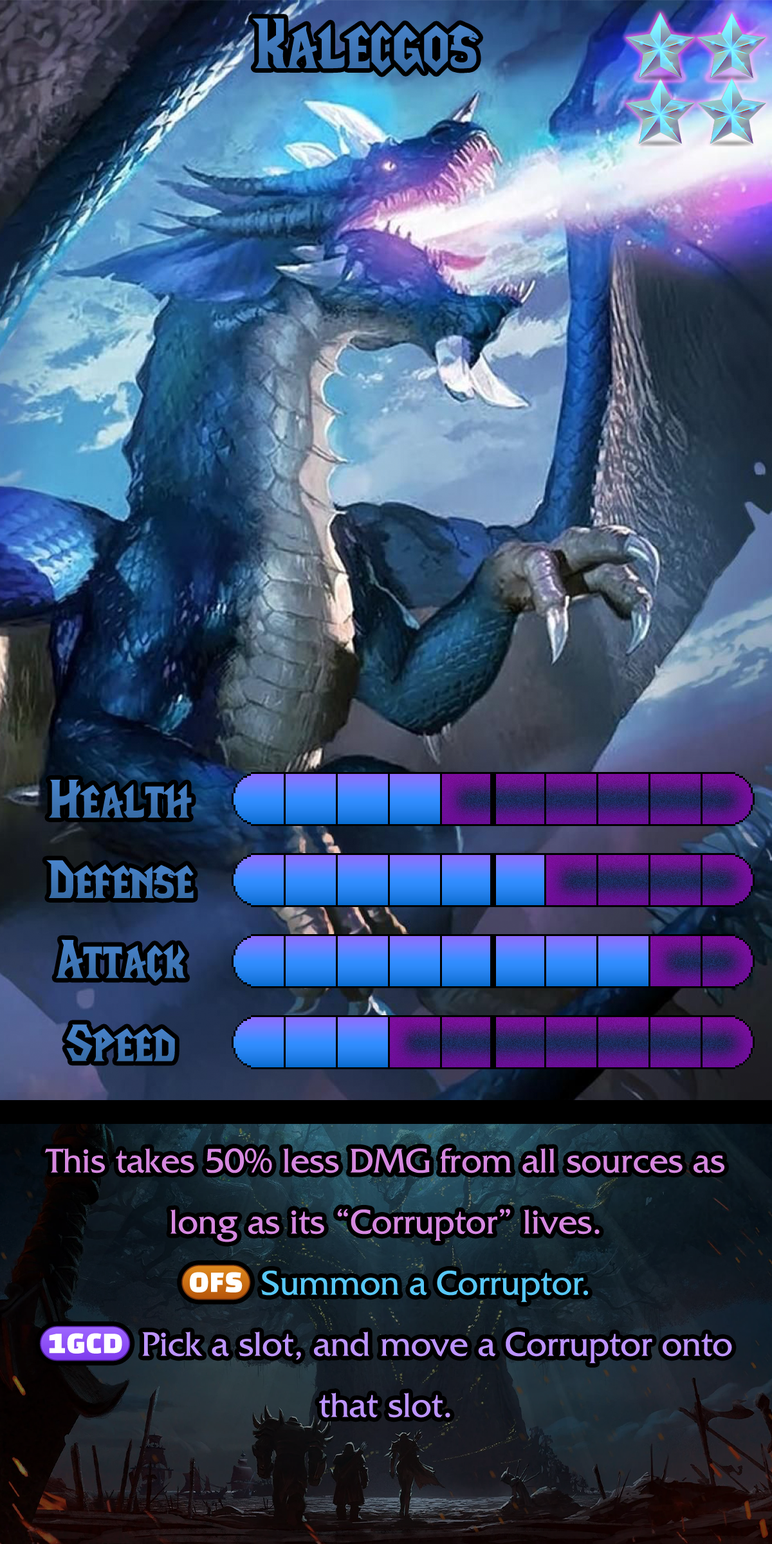
<style>
.page{position:relative;width:772px;height:1544px}
.page>*{position:absolute;margin:0}
.t1{font:121.6px "LifeCraft";color:#3f76b6}
.t2{font:92.7px "LifeCraft";color:#3f75b5}
.t3{font:92.7px "LifeCraft";color:#3f76b6}
.t4{font:92.7px "LifeCraft";color:#4077b7}
.t5{font:61.1px/61.1px "FrizQuadrataStd";color:#d688e0}
.t6{font:61.1px/61.1px "stoogedings-Regular";color:#57c7f6}
.t7{font:61.1px/61.1px "FrizQuadrataStd";color:#57c7f6}
.t8{font:61.1px/61.1px "stoogedings-Regular";color:#bc93ff}
.t9{font:61.1px/61.1px "FrizQuadrataStd";color:#bc93ff}
</style>
<div class="page">
<p class="t1" style="left:252px;top:18px;width:227px;height:55px">Kalecgos</p>
<p class="t2" style="left:49px;top:780px;width:143px;height:38px">Health</p>
<p class="t3" style="left:46px;top:860px;width:148px;height:39px">Defense</p>
<p class="t4" style="left:56px;top:939px;width:130px;height:43px">Attack</p>
<p class="t4" style="left:66px;top:1024px;width:109px;height:38px">Speed</p>
<p class="t5" style="left:39px;top:1148px;width:693px;height:270px;text-align:center">This takes 50% less DMG from all sources as long as its “Corruptor” lives.<br><span class="t6">(OFS)</span><span class="t7"> Summon a Corruptor. <br></span><span class="t8">(1GCD)</span><span class="t9"> Pick a slot, and move a Corruptor onto that slot.</span></p>
</div>
